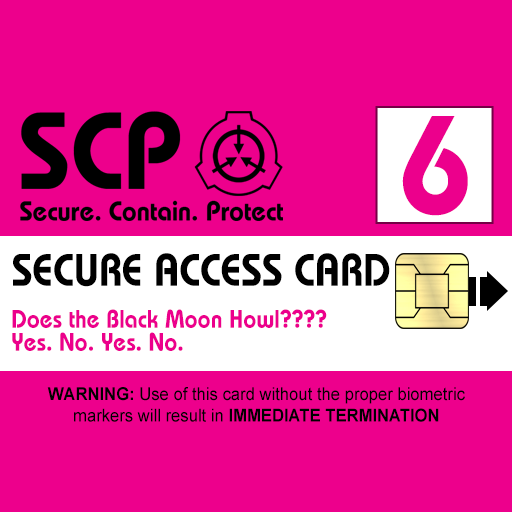
<style>
.page{position:relative;width:512px;height:512px;background:#ed008c}
.page>*{position:absolute;margin:0}
.t1{font:138.7px "BauhausLT-Demi";color:#ec008c;scale:0.95 1}
.t2{font:45.5px "BauhausLT-Demi";color:#000000;text-transform:uppercase;scale:0.91 1}
.t3{font:25.5px/23.1px "BauhausLT-Demi";color:#ec008c;scale:0.92 1}
.t4{font:17.8px "ArialMT";color:#000000;scale:0.93 1}
.t5{font:17.8px "Arial-BoldMT";color:#000000;scale:0.93 1}
</style>
<div class="page">
<p class="t1" style="left:402px;top:116px;width:66px;height:100px">6</p>
<p class="t2" style="left:13px;top:253px;width:377px;height:34px">Secure Access Card</p>
<p class="t3" style="left:12px;top:309px;width:315px;height:42px">Does the Black Moon Howl????<br>Yes. No. Yes. No.</p>
<p class="t4" style="left:47px;top:387px;width:418px;height:35px;text-align:center"><span class="t5">WARNING: </span>Use of this card without the proper biometric<br>markers will result in <span class="t5">IMMEDIATE TERMINATION</span></p>
</div>
